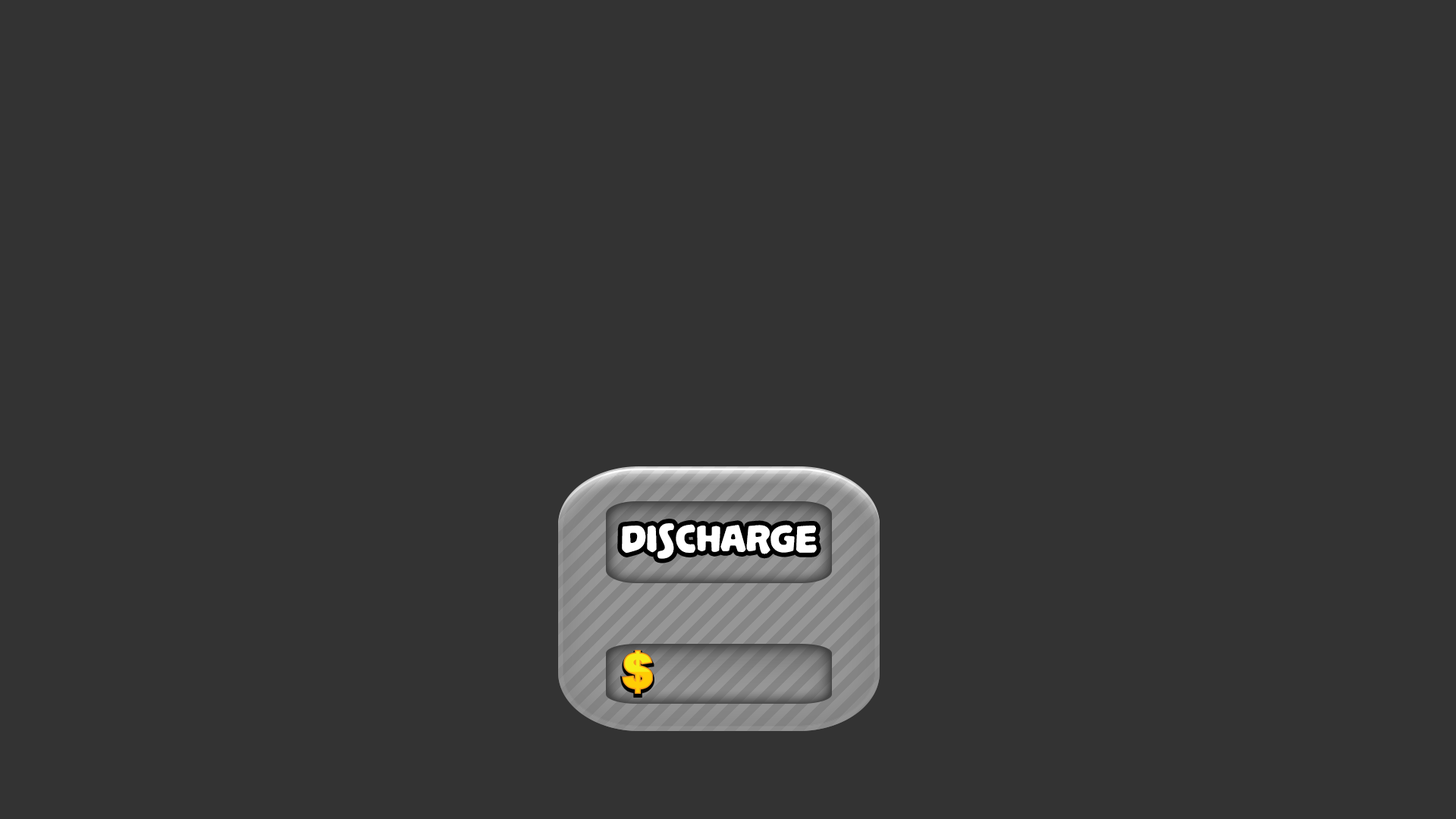
<style>
.page{position:relative;width:1456px;height:819px;background:#333333}
.page>*{position:absolute;margin:0}
.t1{font:41.2px "PalameciaTitling-Regular";letter-spacing:-0.02em;color:#ffffff}
</style>
<div class="page">
<p class="t1" style="left:622px;top:523px;width:195px;height:36px">Discharge</p>
</div>
